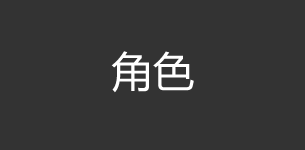
<style>
.page{position:relative;width:305px;height:150px;background:#333333}
.page>*{position:absolute;margin:0}
.t1{font:41.7px "MicrosoftYaHei";color:#ffffff}
</style>
<div class="page">
<p class="t1" style="left:111px;top:51px;width:83px;height:42px">角色</p>
</div>
